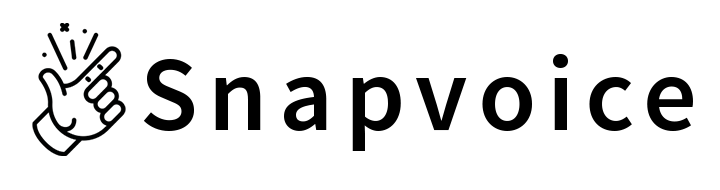
<style>
.page{position:relative;width:720px;height:190px;background:#ffffff}
.page>*{position:absolute;margin:0}
.t1{font:106.7px "SourceSansPro-Semibold";letter-spacing:0.1em;color:#000000}
</style>
<div class="page">
<p class="t1" style="left:143px;top:54px;width:550px;height:97px">Snapvoice</p>
</div>
